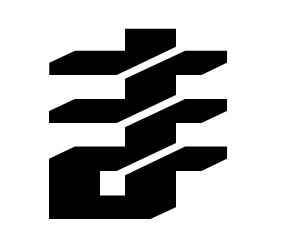
<style>
.page{position:relative;width:300px;height:250px;background:#ffffff}
.page>*{position:absolute;margin:0}
.t1{font:241.8px "TA-rb0925";letter-spacing:0.08em;color:#000000}
</style>
<div class="page">
<p class="t1" style="left:49px;top:28px;width:179px;height:191px">ま</p>
</div>
